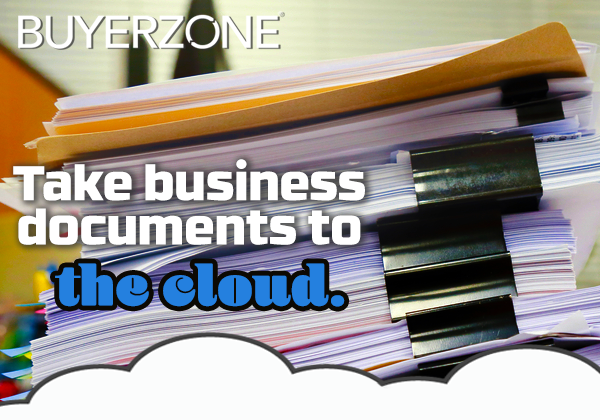
<style>
.page{position:relative;width:600px;height:420px}
.page>*{position:absolute;margin:0}
.t1{font:48.7px/44.3px "RBNo3.1-BlackDEMO";color:#ffffff}
.t2{font:58.5px "Blenny-Black";color:#2480df}
</style>
<div class="page">
<p class="t1" style="left:13px;top:159px;width:352px;height:86px;text-align:center">Take business<br>documents to</p>
<p class="t2" style="left:55px;top:263px;width:290px;height:44px">the cloud.</p>
</div>
